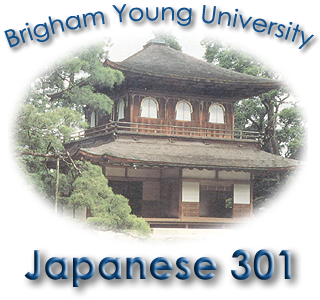
<style>
.page{position:relative;width:320px;height:300px;background:#ffffff}
.page>*{position:absolute;margin:0}
.t1{font:24px "CenturyGothic";letter-spacing:0.01em;color:#12518d}
.t2{font:40px "CenturyGothic-Bold";letter-spacing:0.01em}
</style>
<div class="page">
<p class="t1" style="left:4px;top:4px;width:310px;height:45px">Brigham Young University</p>
<p class="t2" style="left:24px;top:249px;width:267px;height:38px">Japanese 301</p>
</div>
